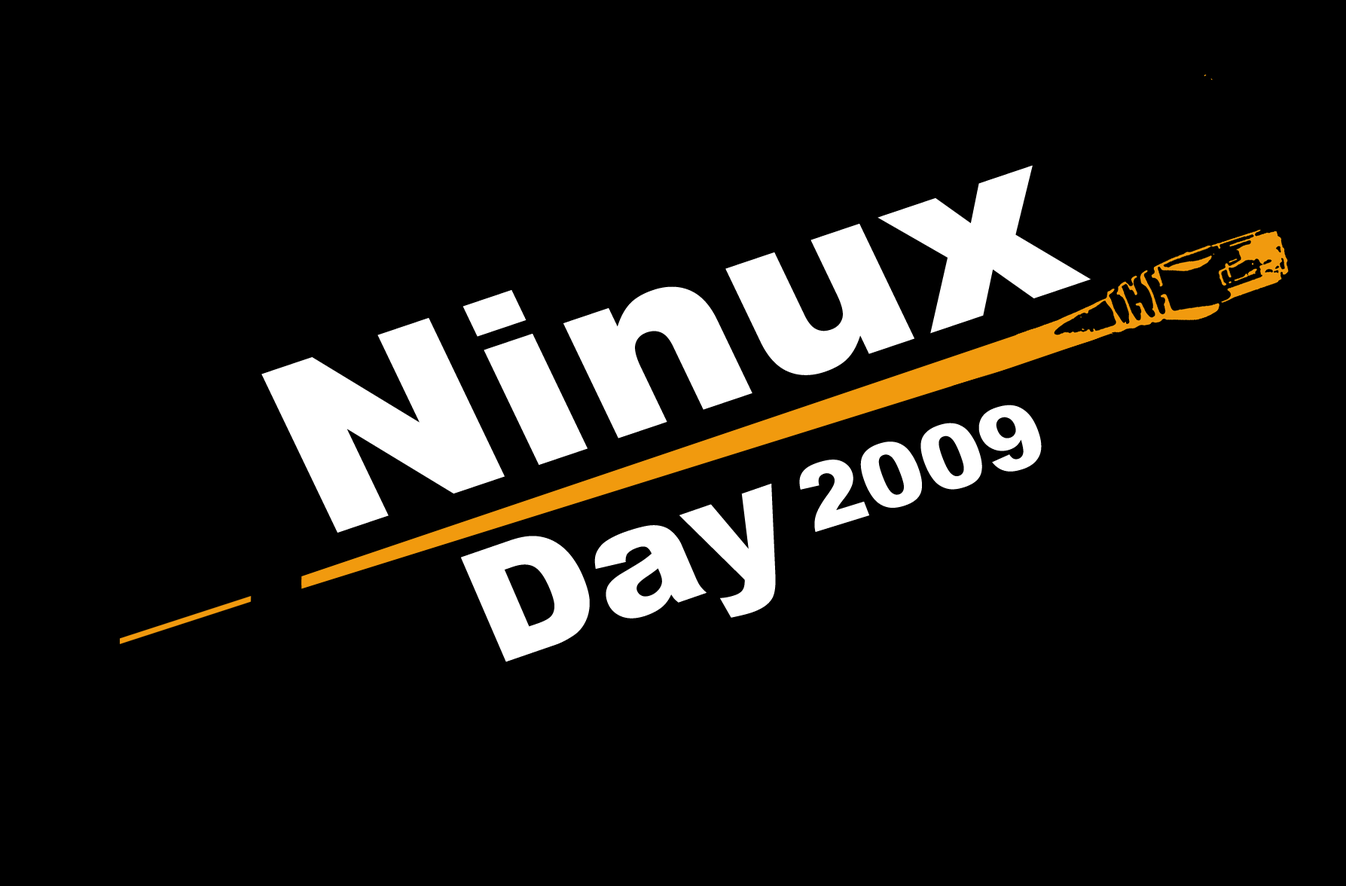
<style>
.page{position:relative;width:1346px;height:886px;background:#000000}
.page>*{position:absolute;margin:0}
.t1{font:245.3px "Arial-Black";color:#ffffff;scale:1.05 1}
.t2{font:90.1px "Arial-Black";color:#ffffff;scale:1.04 1}
.t3{font:158.7px "Arial-Black";color:#ffffff}
</style>
<div class="page">
<p class="t1" style="left:261px;top:165px;width:830px;height:368px;rotate:-19deg">Ninux</p>
<p class="t2" style="left:799px;top:405px;width:243px;height:127px;rotate:-17deg">2009</p>
<p class="t3" style="left:461px;top:484px;width:315px;height:178px;rotate:-19deg">Day</p>
</div>
